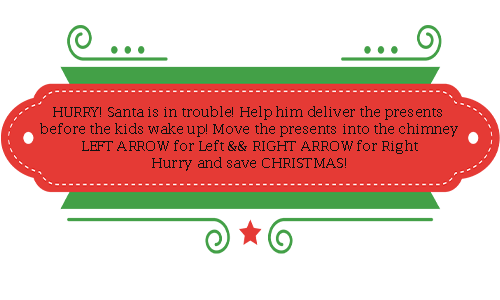
<style>
.page{position:relative;width:500px;height:300px;background:#ffffff}
.page>*{position:absolute;margin:0}
.t1{font:14px "LucidaFax";color:#111111}
</style>
<div class="page">
<p class="t1" style="left:40px;top:106px;width:418px;height:65px;text-align:center">HURRY! Santa is in trouble! Help him deliver the presents <br>before the kids wake up! Move the presents into the chimney<br>LEFT ARROW for Left &amp;&amp; RIGHT ARROW for Right<br>Hurry and save CHRISTMAS!</p>
</div>
